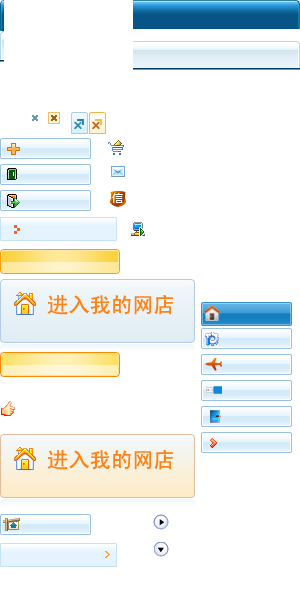
<style>
.page{position:relative;width:300px;height:595px;background:#ffffff}
.page>*{position:absolute;margin:0}
.t1{font:21.3px "SimHei";color:#ff8214}
</style>
<div class="page">
<p class="t1" style="left:47px;top:295px;width:126px;height:20px">进入我的网店</p>
<p class="t1" style="left:47px;top:450px;width:126px;height:20px">进入我的网店</p>
</div>
